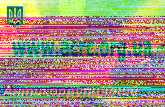
<style>
.page{position:relative;width:165px;height:107px}
.page>*{position:absolute;margin:0}
.t1{font:14px "Arial-BoldItalicMT"}
</style>
<div class="page">
<p class="t1" style="left:2px;top:85px;width:137px;height:14px">Антикоррупційний</p>
<p class="t1" style="left:107px;top:97px;width:55px;height:11px">портал</p>
</div>
